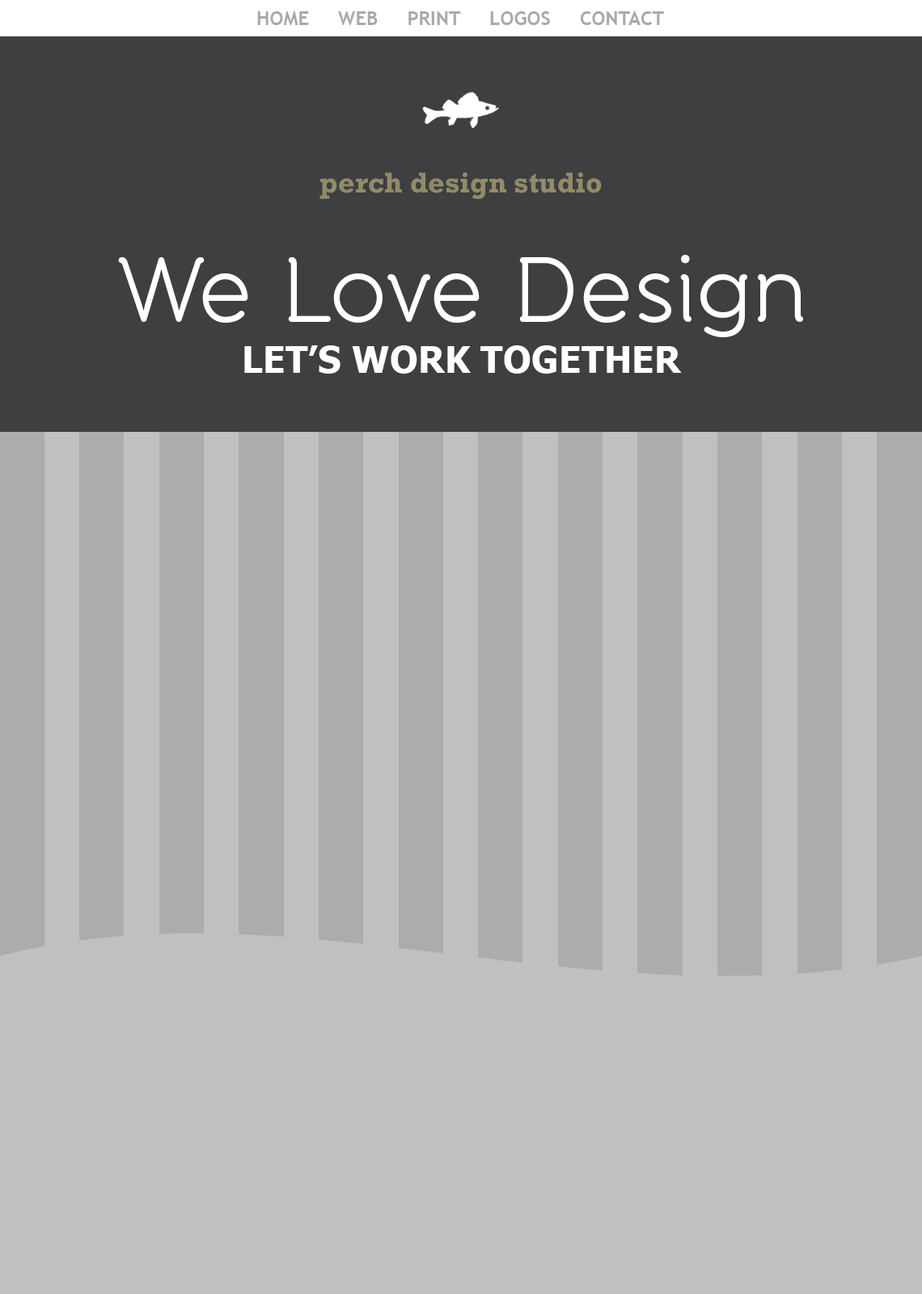
<style>
.page{position:relative;width:922px;height:1294px;background:#c1c0c0}
.page>*{position:absolute;margin:0}
.t1{font:19.4px "TrebuchetMS-Bold";color:#aaa9a9}
.t2{font:29.1px "Rockwell-Bold";color:#938a69}
.t3{font:92.1px "BandaRegular";color:#ffffff}
.t4{font:36.6px "Tahoma-Bold";color:#ffffff}
</style>
<div class="page">
<p class="t1" style="left:257px;top:11px;width:407px;height:14px">HOME     WEB     PRINT     LOGOS     CONTACT</p>
<p class="t2" style="left:319px;top:172px;width:283px;height:27px">perch design studio</p>
<p class="t3" style="left:118px;top:255px;width:685px;height:82px">We Love Design</p>
<p class="t4" style="left:244px;top:345px;width:438px;height:29px">LET’S WORK TOGETHER</p>
</div>
